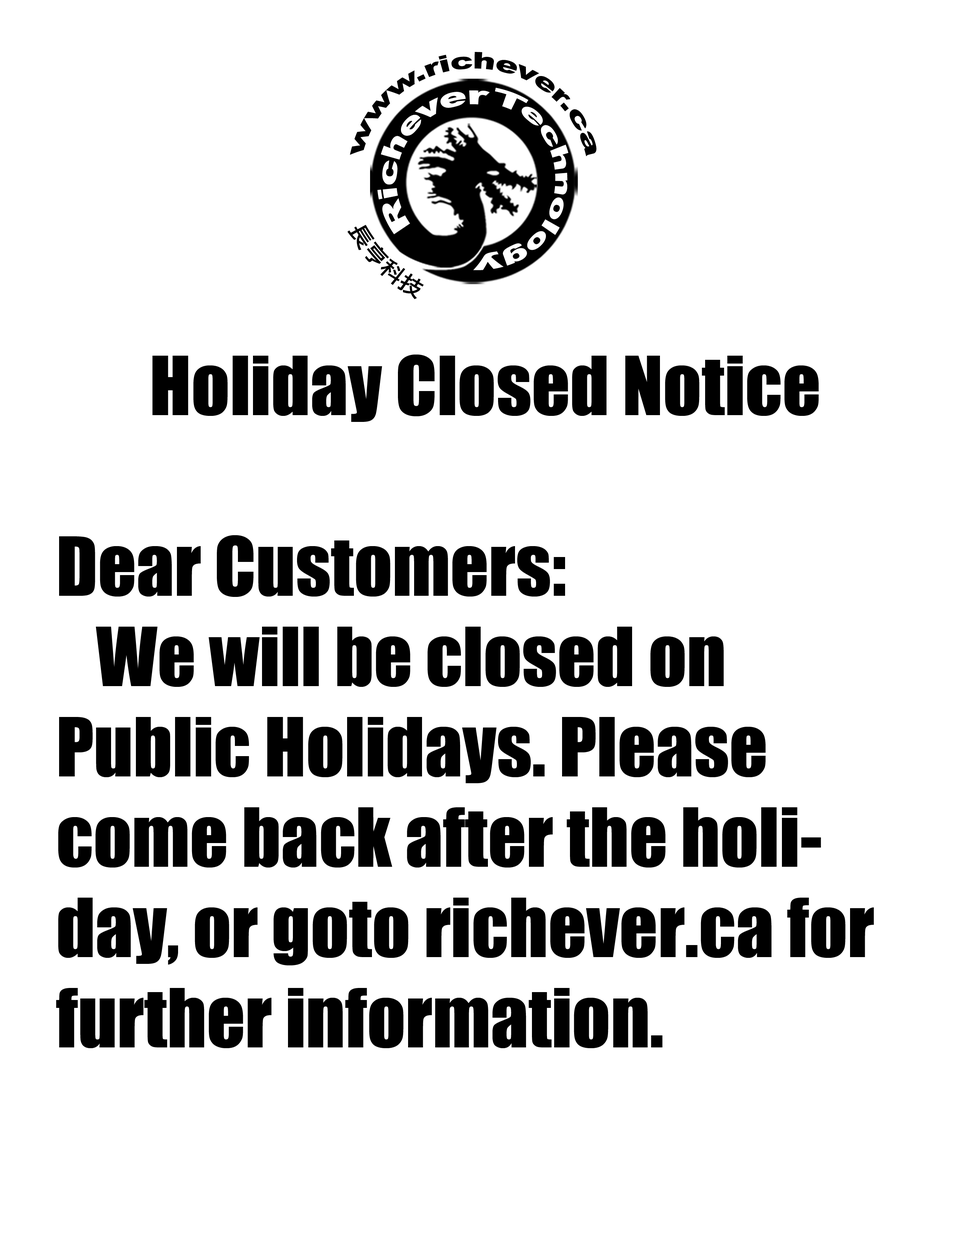
<style>
.page{position:relative;width:960px;height:1242px;background:#ffffff}
.page>*{position:absolute;margin:0}
.t1{font:75.3px "Impact";color:#000000}
</style>
<div class="page">
<p class="t1" style="left:56px;top:355px;width:818px;height:693px;text-align:center">Holiday Closed Notice<br><br>Dear Customers: <br>   We will be closed on Public Holidays. Please come back after the holiday, or goto richever.ca for further information.</p>
</div>
